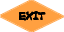
<style>
.page{position:relative;width:64px;height:32px;background:#ffffff}
.page>*{position:absolute;margin:0}
.t1{font:12px "Croobie";color:#000000}
</style>
<div class="page">
<p class="t1" style="left:19px;top:11px;width:27px;height:10px">EXIT</p>
</div>
